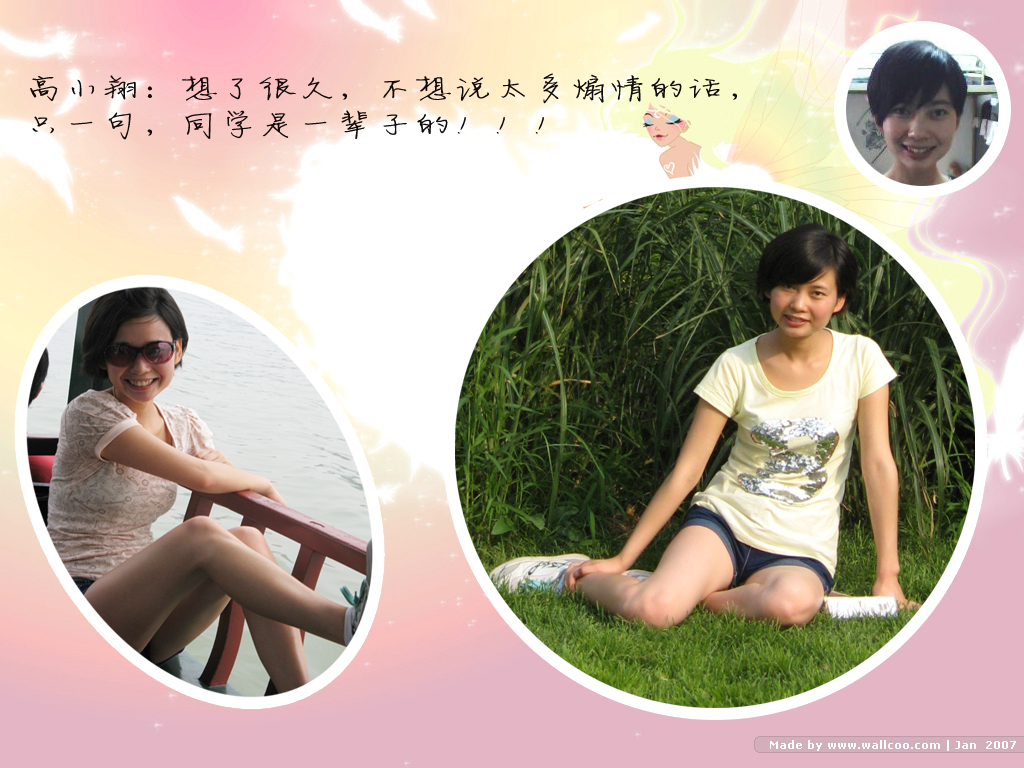
<style>
.page{position:relative;width:1024px;height:768px}
.page>*{position:absolute;margin:0}
.t1{font:30px/36px "FZJLJW--GB1-0";color:#110c0c;scale:1.3 1}
</style>
<div class="page">
<p class="t1" style="left:30px;top:73px;width:707px;height:67px">高小翔：想了很久，不想说太多煽情的话，<br>只一句，同学是一辈子的！！！</p>
</div>
